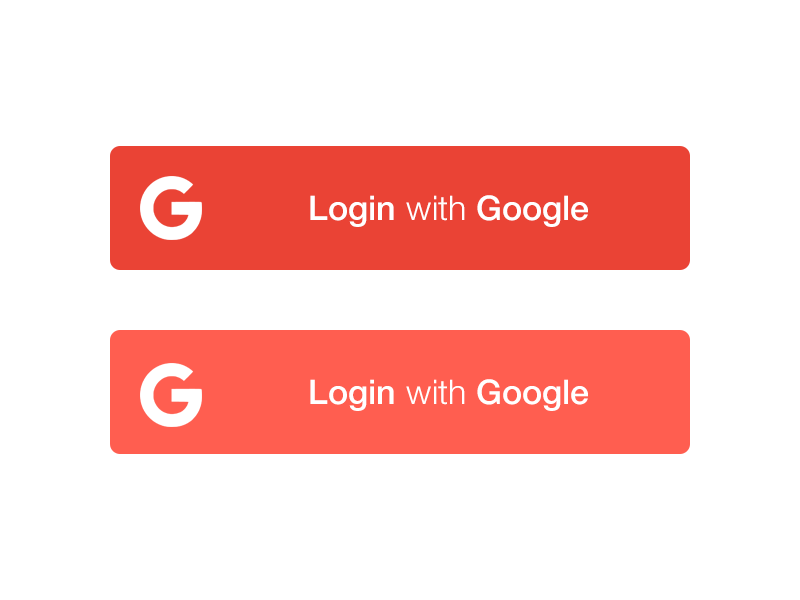
<style>
.page{position:relative;width:800px;height:600px;background:#ffffff}
.page>*{position:absolute;margin:0}
.t1{font:34px "HelveticaNeue-Medium";color:#ffffff}
.t2{font:34px "HelveticaNeue-Light";color:#ffffff}
</style>
<div class="page">
<p class="t1" style="left:310px;top:195px;width:278px;height:32px">Login <span class="t2">with</span> Google</p>
<p class="t1" style="left:310px;top:379px;width:278px;height:32px">Login <span class="t2">with</span> Google</p>
</div>
